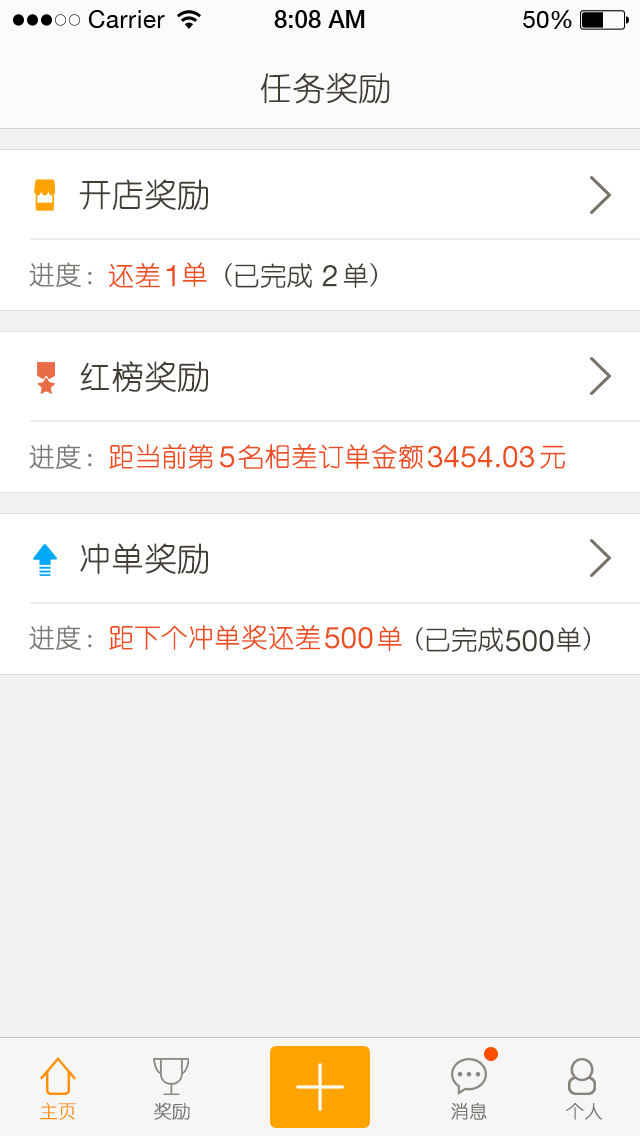
<style>
.page{position:relative;width:640px;height:1136px;background:#ffffff}
.page>*{position:absolute;margin:0}
.t1{font:32px "YouYuan";color:#423d33;text-transform:uppercase;font-weight:bold}
.t2{font:32px "YouYuan";color:#433e34;text-transform:uppercase;font-weight:bold}
.t3{font:26px "YouYuan";color:#7b7973;text-transform:uppercase;font-weight:bold}
.t4{font:26px "YouYuan";color:#ed4e1f;text-transform:uppercase;font-weight:bold}
.t5{font:30px "HelveticaNeueLTPro-Roman";color:#ed4e1f;text-transform:uppercase}
.t6{font:26px "YouYuan";color:#433e34;text-transform:uppercase;font-weight:bold}
.t7{font:30px "HelveticaNeueLTPro-Roman";color:#433e34;text-transform:uppercase}
.t8{font:18px "YouYuan";color:#ff9000;font-weight:bold}
.t9{font:18px "YouYuan";color:#77746f;text-transform:uppercase;font-weight:bold}
</style>
<div class="page">
<p class="t1" style="left:260px;top:73px;width:130px;height:31px">任务奖励</p>
<p class="t2" style="left:79px;top:179px;width:129px;height:31px">开店奖励</p>
<p class="t3" style="left:29px;top:262px;width:63px;height:25px">进度：</p>
<p class="t4" style="left:108px;top:263px;width:52px;height:25px">还差</p>
<p class="t5" style="left:166px;top:265px;width:9px;height:22px">1</p>
<p class="t4" style="left:182px;top:262px;width:25px;height:25px">单</p>
<p class="t6" style="left:225px;top:263px;width:87px;height:25px">(已完成</p>
<p class="t7" style="left:322px;top:265px;width:15px;height:22px">2</p>
<p class="t6" style="left:343px;top:263px;width:34px;height:25px">单)</p>
<p class="t2" style="left:80px;top:361px;width:128px;height:32px">红榜奖励</p>
<p class="t3" style="left:29px;top:444px;width:63px;height:25px">进度：</p>
<p class="t4" style="left:109px;top:443px;width:104px;height:26px">距当前第</p>
<p class="t5" style="left:220px;top:446px;width:15px;height:22px">5</p>
<p class="t4" style="left:238px;top:444px;width:185px;height:25px">名相差订单金额</p>
<p class="t5" style="left:428px;top:446px;width:106px;height:22px">3454.03</p>
<p class="t4" style="left:540px;top:445px;width:25px;height:24px">元</p>
<p class="t2" style="left:80px;top:543px;width:128px;height:31px">冲单奖励</p>
<p class="t3" style="left:29px;top:625px;width:63px;height:25px">进度：</p>
<p class="t4" style="left:109px;top:625px;width:211px;height:25px">距下个冲单奖还差</p>
<p class="t5" style="left:325px;top:627px;width:48px;height:22px">500</p>
<p class="t4" style="left:377px;top:626px;width:25px;height:25px">单</p>
<p class="t6" style="left:416px;top:627px;width:87px;height:25px">(已完成</p>
<p class="t7" style="left:506px;top:630px;width:48px;height:22px">500</p>
<p class="t6" style="left:556px;top:627px;width:34px;height:25px">单)</p>
<p class="t8" style="left:40px;top:1102px;width:36px;height:18px">主页</p>
<p class="t9" style="left:154px;top:1102px;width:36px;height:18px">奖励</p>
<p class="t9" style="left:451px;top:1102px;width:36px;height:18px">消息</p>
<p class="t9" style="left:566px;top:1103px;width:36px;height:17px">个人</p>
</div>
